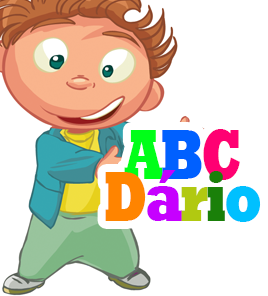
<style>
.page{position:relative;width:268px;height:296px;background:#ffffff}
.page>*{position:absolute;margin:0}
.t1{font:17.2px/42.3px "Rockwell-ExtraBold";letter-spacing:-0.05em;color:#00ff18;scale:0.71 1}
.t2{font:17.2px/42.3px "Rockwell-ExtraBold";letter-spacing:-0.05em;color:#0060ff;scale:0.71 1}
.t3{font:17.2px/42.3px "Rockwell-ExtraBold";letter-spacing:-0.05em;color:#ff0072;scale:0.71 1}
.t4{font:17.2px/42.3px "Rockwell-ExtraBold";letter-spacing:-0.05em;color:#ff8400;scale:0.71 1}
.t5{font:17.2px/42.3px "Rockwell-ExtraBold";letter-spacing:-0.05em;color:#c600ff;scale:0.71 1}
.t6{font:17.2px/42.3px "Rockwell-ExtraBold";letter-spacing:-0.05em;color:#b1c911;scale:0.71 1}
.t7{font:17.2px/42.3px "Rockwell-ExtraBold";letter-spacing:-0.05em;color:#1a8009;scale:0.71 1}
.t8{font:17.2px/42.3px "Rockwell-ExtraBold";letter-spacing:-0.05em;color:#00c0ff;scale:0.71 1}
</style>
<div class="page">
<p class="t1" style="left:105px;top:129px;width:156px;height:93px;text-align:center">A<span class="t2">B</span><span class="t3">C<br></span><span class="t4">D</span><span class="t5">á</span><span class="t6">r</span><span class="t7">i</span><span class="t8">o</span></p>
</div>
